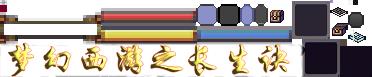
<style>
.page{position:relative;width:372px;height:77px;background:#ffffff}
.page>*{position:absolute;margin:0}
.t1{font:36px "STXingkai"}
</style>
<div class="page">
<p class="t1" style="left:8px;top:43px;width:282px;height:34px">梦幻西游之长生诀</p>
</div>
